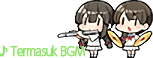
<style>
.page{position:relative;width:153px;height:58px;background:#ffffff}
.page>*{position:absolute;margin:0}
.t1{font:13px "UDShinGoPro-Light";letter-spacing:-0.08em;color:#91e469;font-weight:bold;scale:0.8 1}
</style>
<div class="page">
<p class="t1" style="left:10px;top:45px;width:76px;height:12px">Termasuk BGM</p>
</div>
